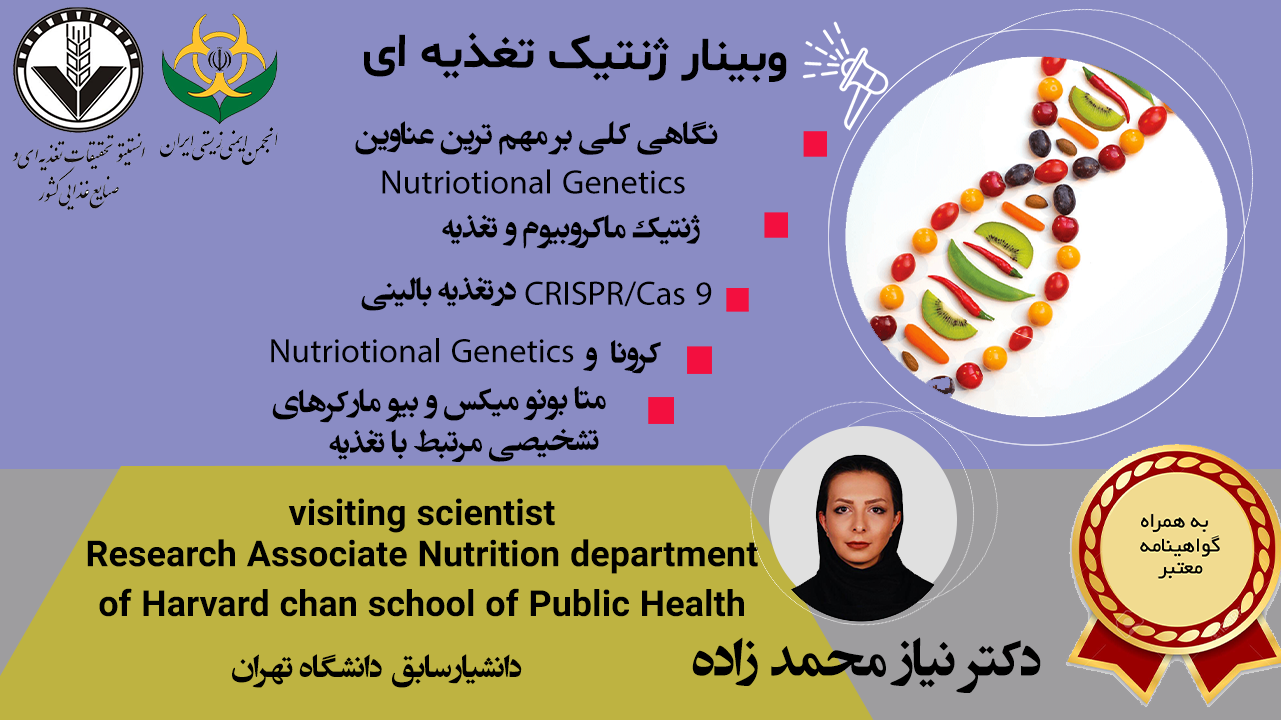
<style>
.page{position:relative;width:1281px;height:720px;background:#8a8cc4}
.page>*{position:absolute;margin:0}
.t1{font:48px "Shabnam-Bold";color:#000000}
.t2{font:36px/8.3px "BZarBold-_-Edit-for-Poster-Design";color:#000000}
.t3{font:48px/8.3px "MyriadArabic-Regular";color:#000000}
.t4{font:36px "BZarBold-_-Edit-for-Poster-Design";color:#000000}
.t5{font:48px "MyriadArabic-Regular";color:#000000}
.t6{font:36px/8.3px "Shabnam-Bold";color:#000000}
.t7{font:60px "BZarBold-_-Edit-for-Poster-Design";color:#000000}
</style>
<div class="page">
<p class="t1" style="left:364px;top:32px;width:423px;height:51px;rotate:1deg">وبینار ژنتیک تغذیه ای</p>
<p class="t2" style="left:355px;top:121px;width:363px;height:73px;text-align:center">نگاهی کلی بر مهم ترین عناوین <br><br><br><br><br><br> <span class="t3">Nutriotional Genetics</span></p>
<p class="t4" style="left:442px;top:214px;width:258px;height:35px">ژنتیک ماکروبیوم و تغذیه</p>
<p class="t4" style="left:361px;top:277px;width:155px;height:34px">درتغذیه بالینی</p>
<p class="t5" style="left:525px;top:281px;width:187px;height:26px">CRISPR/Cas 9</p>
<p class="t5" style="left:271px;top:338px;width:303px;height:25px">Nutriotional Genetics</p>
<p class="t4" style="left:583px;top:340px;width:78px;height:34px">کرونا  و</p>
<p class="t2" style="left:272px;top:386px;width:334px;height:76px;rotate:-1deg">متا بونو میکس و بیو مارکرهای<br><br><br><br><br> تشخیصی مرتبط با تغذیه</p>
<p class="t6" style="left:87px;top:498px;width:671px;height:119px;text-align:center">visiting scientist<br><br><br><br><br>Research Associate Nutrition department <br><br><br><br><br><br>of Harvard chan school of Public Health</p>
<p class="t7" style="left:692px;top:637px;width:349px;height:56px">دکتر نیاز محمد زاده</p>
<p class="t4" style="left:232px;top:654px;width:290px;height:34px">دانشیارسابق دانشگاه تهران</p>
</div>
